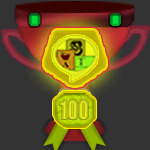
<style>
.page{position:relative;width:150px;height:150px;background:#333333}
.page>*{position:absolute;margin:0}
.t1{font:24.2px "Impact";scale:0.82 1}
</style>
<div class="page">
<p class="t1" style="left:60px;top:99px;width:28px;height:21px">100</p>
</div>
